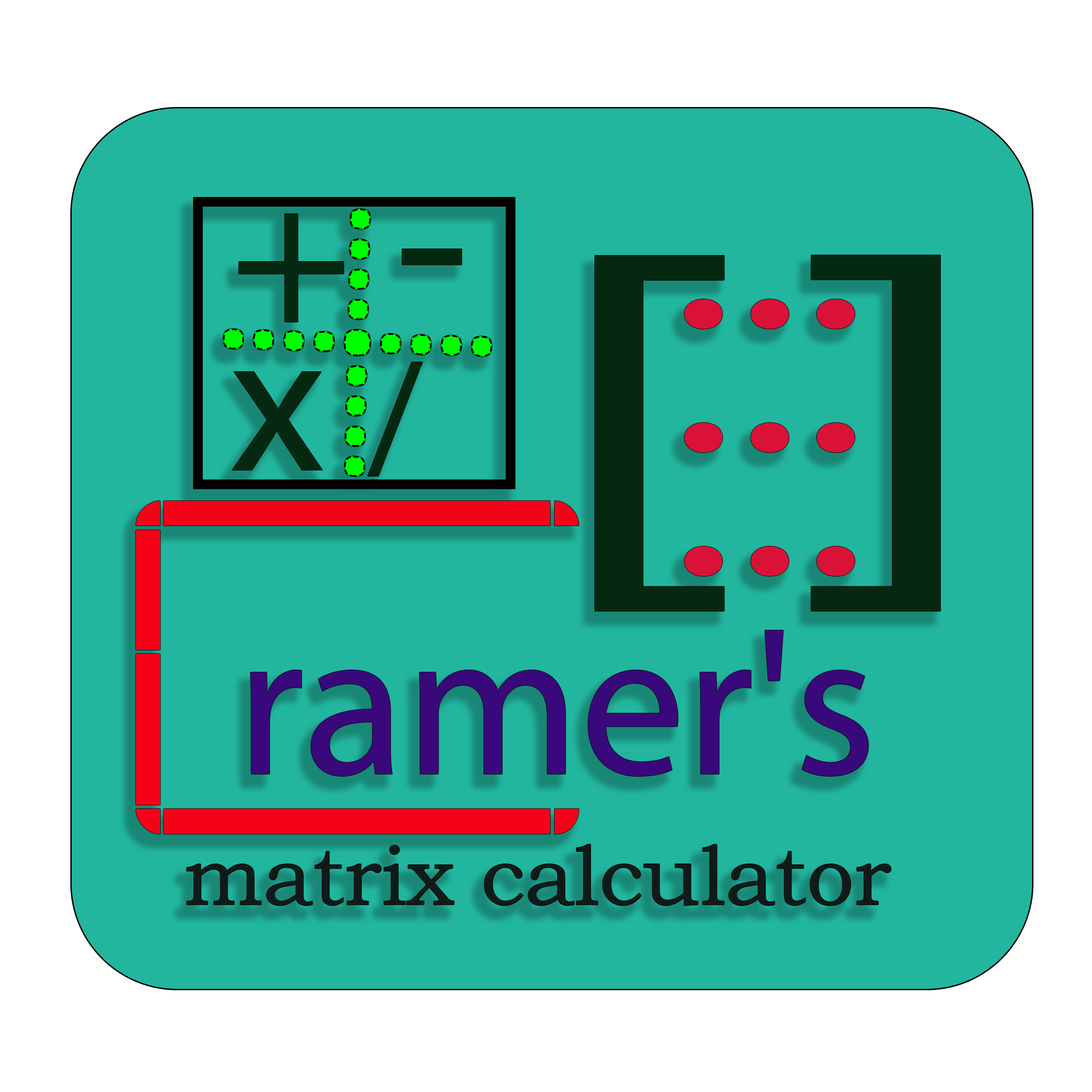
<style>
.page{position:relative;width:1092px;height:1092px;background:#22b69f}
.page>*{position:absolute;margin:0}
.t1{font:203.3px/147.9px "MyriadPro-Regular";color:#042910}
.t2{font:241.1px/147.9px "MyriadPro-Regular";color:#042910}
.t3{font:157.2px/147.9px "MyriadPro-Regular";color:#042910}
.t4{font:446.8px "MyriadPro-Regular";color:#042910;scale:1.58 1}
.t5{font:236.8px/123.6px "MyriadPro-Regular";color:#da1238;scale:1.35 1}
.t6{font:503.2px "Capacitor-Regular";color:#f50219}
.t7{font:210.2px "MyriadPro-Regular";color:#39097b}
.t8{font:84.4px "BookmanOldStyle";color:#101b19}
</style>
<div class="page">
<p class="t1" style="left:232px;top:214px;width:230px;height:262px">+ <span class="t2">-<br></span>x <span class="t3">/</span></p>
<p class="t4" style="left:595px;top:255px;width:345px;height:356px">[ ]</p>
<p class="t5" style="left:684px;top:299px;width:171px;height:277px">...<br>...<br>...</p>
<p class="t6" style="left:136px;top:501px;width:443px;height:333px">C</p>
<p class="t7" style="left:250px;top:630px;width:618px;height:146px">ramer's</p>
<p class="t8" style="left:187px;top:844px;width:704px;height:61px">matrix calculator</p>
</div>
